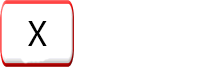
<style>
.page{position:relative;width:220px;height:67px;background:#ffffff}
.page>*{position:absolute;margin:0}
.t1{font:36px "MyriadPro-Regular";color:#000000}
</style>
<div class="page">
<p class="t1" style="left:28px;top:21px;width:19px;height:25px">X</p>
</div>
